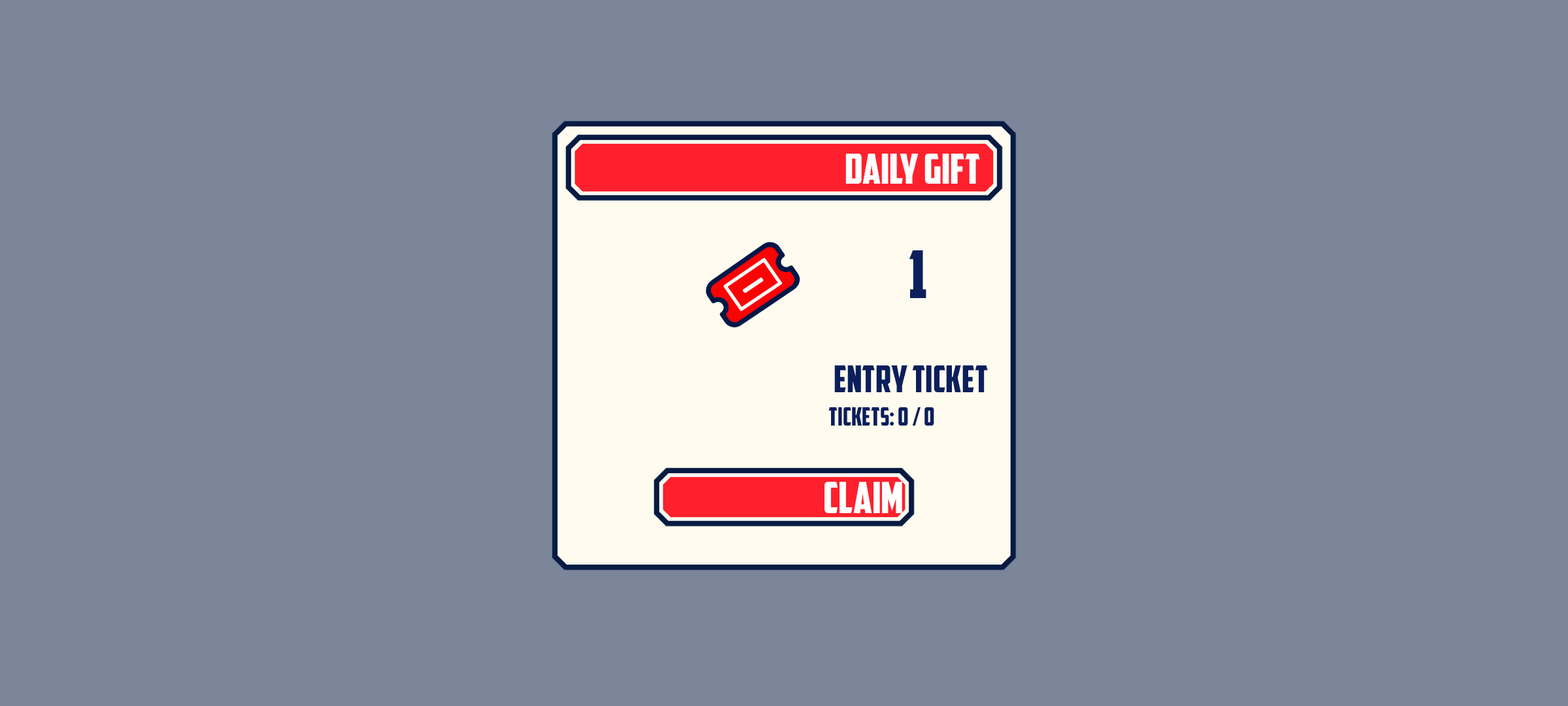
<style>
.page{position:relative;width:1568px;height:706px;background:#7b869a}
.page>*{position:absolute;margin:0}
.t1{font:41.8px "AmericanCaptain";color:#ffffff}
.t2{font:65.3px "AmericanCaptain";color:#0a1f5c}
.t3{font:36.6px "AmericanCaptain";color:#0a1f5c}
.t4{font:24.8px "AmericanCaptain";color:#0a1f5c}
.t5{font:43.1px "AmericanCaptain";color:#ffffff}
</style>
<div class="page">
<p class="t1" style="left:845px;top:154px;width:135px;height:30px">DAILY GIFT</p>
<p class="t2" style="left:909px;top:250px;width:17px;height:48px">1</p>
<p class="t3" style="left:834px;top:365px;width:154px;height:27px">ENTRY TICKET</p>
<p class="t4" style="left:828px;top:407px;width:106px;height:18px">Tickets: 0 / 0</p>
<p class="t5" style="left:825px;top:482px;width:77px;height:31px">CLAIM</p>
</div>
